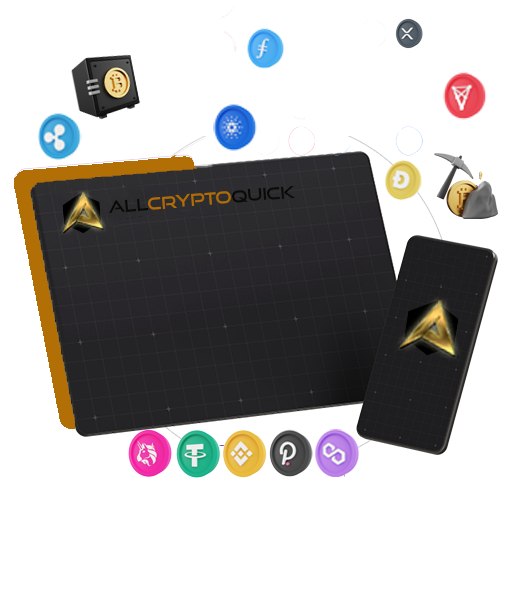
<style>
.page{position:relative;width:513px;height:591px;background:#ffffff}
.page>*{position:absolute;margin:0}
.t1{font:16.4px "GoodTimesRg-Regular"}
</style>
<div class="page">
<p class="t1" style="left:109px;top:185px;width:186px;height:28px;rotate:-5deg">ALLCRYPTOQUICK</p>
</div>
